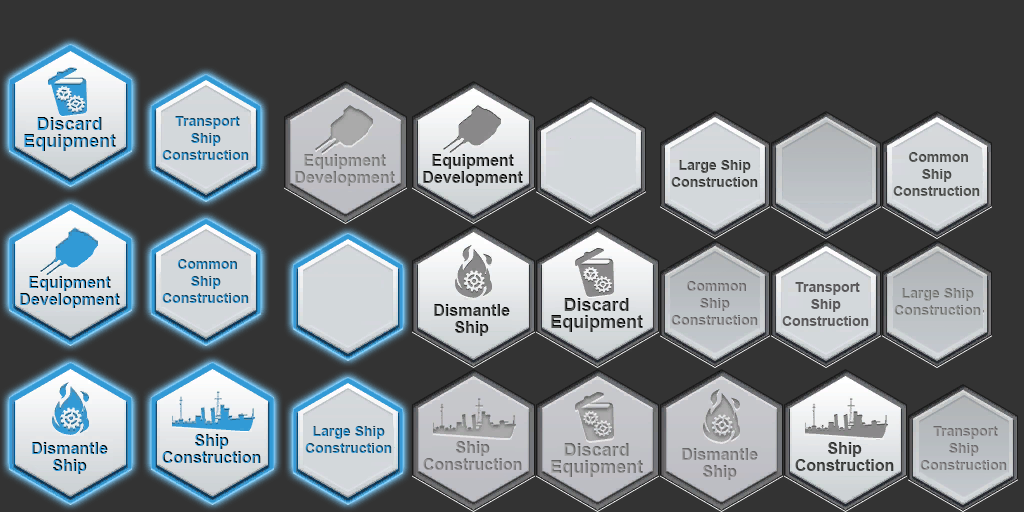
<style>
.page{position:relative;width:1024px;height:512px;background:#333333}
.page>*{position:absolute;margin:0}
.t1{font:18px/17px "Arial-BoldMT"}
.t2{font:14px/17px "Arial-BoldMT"}
.t3{font:16px/17px "Arial-BoldMT";color:#8f8f8f}
.t4{font:16px/17px "Arial-BoldMT"}
.t5{font:14px/17px "Arial-BoldMT";color:#525352}
.t6{font:14px/17px "Arial-BoldMT";color:#63656b}
.t7{font:16px/17px "Arial-BoldMT";color:#525452}
</style>
<div class="page">
<p class="t1" style="left:24px;top:117px;width:92px;height:34px;text-align:center">Discard<br>Equipment</p>
<p class="t2" style="left:162px;top:116px;width:87px;height:44px;text-align:center">Transport<br> Ship <br>Construction</p>
<p class="t3" style="left:295px;top:154px;width:100px;height:32px;text-align:center">Equipment <br>Development</p>
<p class="t4" style="left:423px;top:154px;width:100px;height:32px;text-align:center">Equipment <br>Development</p>
<p class="t2" style="left:671px;top:160px;width:87px;height:27px;text-align:center">Large Ship <br>Construction</p>
<p class="t5" style="left:893px;top:152px;width:87px;height:44px;text-align:center">Common<br> Ship <br>Construction</p>
<p class="t2" style="left:162px;top:259px;width:87px;height:44px;text-align:center">Common<br> Ship <br>Construction</p>
<p class="t4" style="left:20px;top:276px;width:100px;height:32px;text-align:center">Equipment <br>Development</p>
<p class="t2" style="left:671px;top:281px;width:87px;height:44px;text-align:center">Common<br> Ship <br>Construction</p>
<p class="t6" style="left:782px;top:282px;width:87px;height:44px;text-align:center">Transport<br> Ship <br>Construction</p>
<p class="t2" style="left:894px;top:288px;width:87px;height:27px;text-align:center">Large Ship <br>Construction</p>
<p class="t4" style="left:434px;top:304px;width:76px;height:32px;text-align:center">Dismantle<br>Ship</p>
<p class="t1" style="left:551px;top:298px;width:92px;height:34px;text-align:center">Discard<br>Equipment</p>
<p class="t4" style="left:162px;top:434px;width:99px;height:29px;text-align:center">Ship <br>Construction</p>
<p class="t2" style="left:305px;top:426px;width:87px;height:27px;text-align:center">Large Ship <br>Construction</p>
<p class="t2" style="left:920px;top:426px;width:87px;height:44px;text-align:center">Transport<br> Ship <br>Construction</p>
<p class="t4" style="left:32px;top:442px;width:76px;height:32px;text-align:center">Dismantle<br>Ship</p>
<p class="t4" style="left:423px;top:441px;width:99px;height:29px;text-align:center">Ship <br>Construction</p>
<p class="t1" style="left:551px;top:443px;width:92px;height:34px;text-align:center">Discard<br>Equipment</p>
<p class="t4" style="left:682px;top:448px;width:76px;height:32px;text-align:center">Dismantle<br>Ship</p>
<p class="t7" style="left:795px;top:442px;width:99px;height:29px;text-align:center">Ship <br>Construction</p>
</div>
